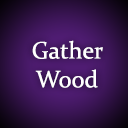
<style>
.page{position:relative;width:128px;height:128px}
.page>*{position:absolute;margin:0}
.t1{font:24px "Constantia";color:#ffffff}
</style>
<div class="page">
<p class="t1" style="left:32px;top:40px;width:71px;height:48px;text-align:center">Gather Wood</p>
</div>
